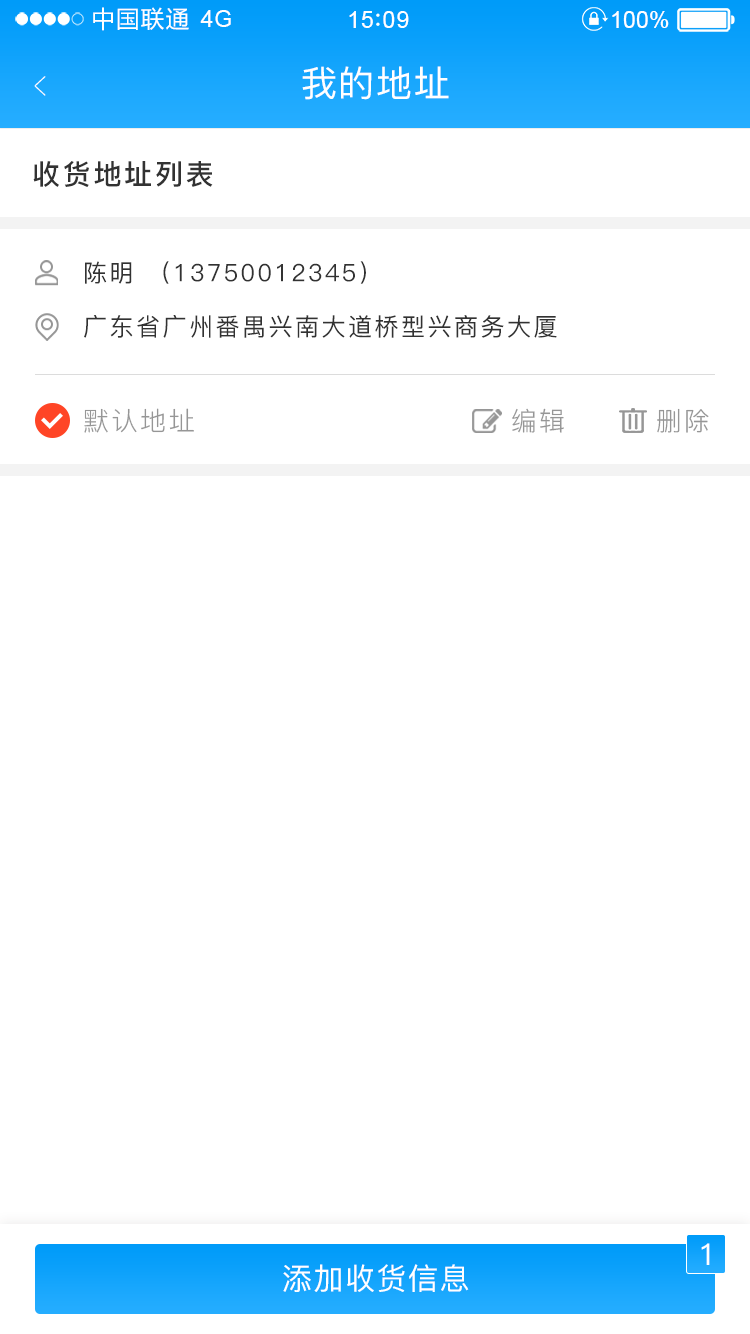
<style>
.page{position:relative;width:750px;height:1334px;background:#ffffff}
.page>*{position:absolute;margin:0}
.t1{font:23.4px "MicrosoftYaHei";letter-spacing:0.06em;color:#ffffff}
.t2{font:23.4px "ArialMT";letter-spacing:0.02em;color:#ffffff}
.t3{font:23.4px "ArialMT";letter-spacing:0.04em;color:#ffffff}
.t4{font:23.4px "ArialMT";color:#ffffff}
.t5{font:39px "PingFang-SC-ExtraLight";letter-spacing:0.1em;color:#ffffff;scale:0.51 1}
.t6{font:36px "PingFang-SC-Medium";letter-spacing:0.05em;color:#ffffff}
.t7{font:28px "PingFang-SC-Bold";letter-spacing:0.1em;color:#323232}
.t8{font:24.1px "PingFang-SC-Medium";letter-spacing:0.1em;color:#323232}
.t9{font:24.5px "PingFang-SC-Medium";letter-spacing:0.1em;color:#323232}
.t10{font:26px "PingFang-SC-Regular";letter-spacing:0.1em;color:#969696}
.t11{font:30px "PingFang-SC-Medium";letter-spacing:0.05em;color:#ffffff}
</style>
<div class="page">
<p class="t1" style="left:93px;top:7px;width:96px;height:24px">中国联通</p>
<p class="t2" style="left:200px;top:10px;width:31px;height:17px">4G</p>
<p class="t3" style="left:349px;top:11px;width:60px;height:17px">15 09</p>
<p class="t4" style="left:612px;top:11px;width:57px;height:17px">100%</p>
<p class="t5" style="left:34px;top:76px;width:12px;height:20px;rotate:180deg">&gt;</p>
<p class="t6" style="left:302px;top:66px;width:147px;height:34px">我的地址</p>
<p class="t7" style="left:33px;top:161px;width:180px;height:26px">收货地址列表</p>
<p class="t8" style="left:85px;top:261px;width:281px;height:23px">陈明 （13750012345）</p>
<p class="t9" style="left:84px;top:315px;width:473px;height:23px">广东省广州番禺兴南大道桥型兴商务大厦</p>
<p class="t10" style="left:84px;top:408px;width:110px;height:25px">默认地址</p>
<p class="t10" style="left:512px;top:408px;width:52px;height:25px">编辑</p>
<p class="t10" style="left:657px;top:408px;width:52px;height:25px">删除</p>
<p class="t11" style="left:701px;top:1243px;width:9px;height:22px">1</p>
<p class="t11" style="left:283px;top:1264px;width:186px;height:28px">添加收货信息</p>
</div>
